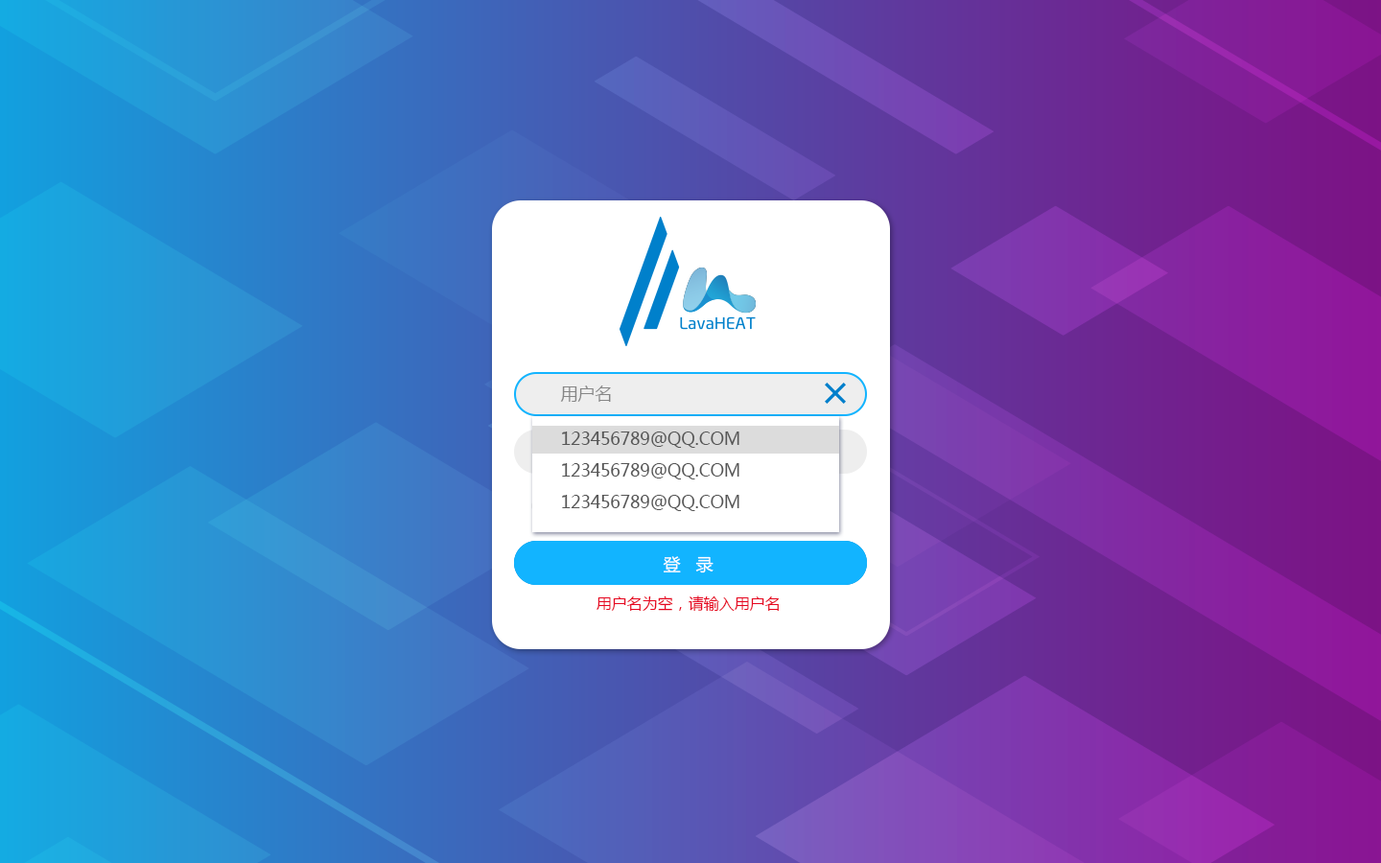
<style>
.page{position:relative;width:1381px;height:863px}
.page>*{position:absolute;margin:0}
.t1{font:17.3px "MicrosoftYaHei";color:#868686;text-transform:uppercase}
.t2{font:16.9px "MicrosoftYaHei";color:#565656;text-transform:uppercase}
.t3{font:17.3px "MicrosoftYaHei";color:#ffffff;text-transform:uppercase}
.t4{font:15.3px "MicrosoftYaHei";color:#e6041f;text-transform:uppercase}
</style>
<div class="page">
<p class="t1" style="left:560px;top:386px;width:51px;height:16px">用户名</p>
<p class="t2" style="left:562px;top:432px;width:178px;height:16px">123456789@qq.com</p>
<p class="t2" style="left:562px;top:463px;width:178px;height:17px">123456789@qq.com</p>
<p class="t2" style="left:562px;top:495px;width:178px;height:16px">123456789@qq.com</p>
<p class="t3" style="left:663px;top:556px;width:51px;height:18px">登   录</p>
<p class="t4" style="left:597px;top:596px;width:182px;height:15px">用户名为空，请输入用户名</p>
</div>
